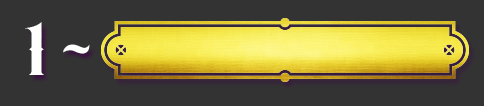
<style>
.page{position:relative;width:484px;height:106px;background:#333333}
.page>*{position:absolute;margin:0}
.t1{font:100px "Moyers";color:#fffffe}
.t2{font:100px "Moyers";color:#ffffff}
</style>
<div class="page">
<p class="t1" style="left:25px;top:22px;width:19px;height:53px">1</p>
<p class="t2" style="left:63px;top:44px;width:27px;height:10px">~</p>
</div>
